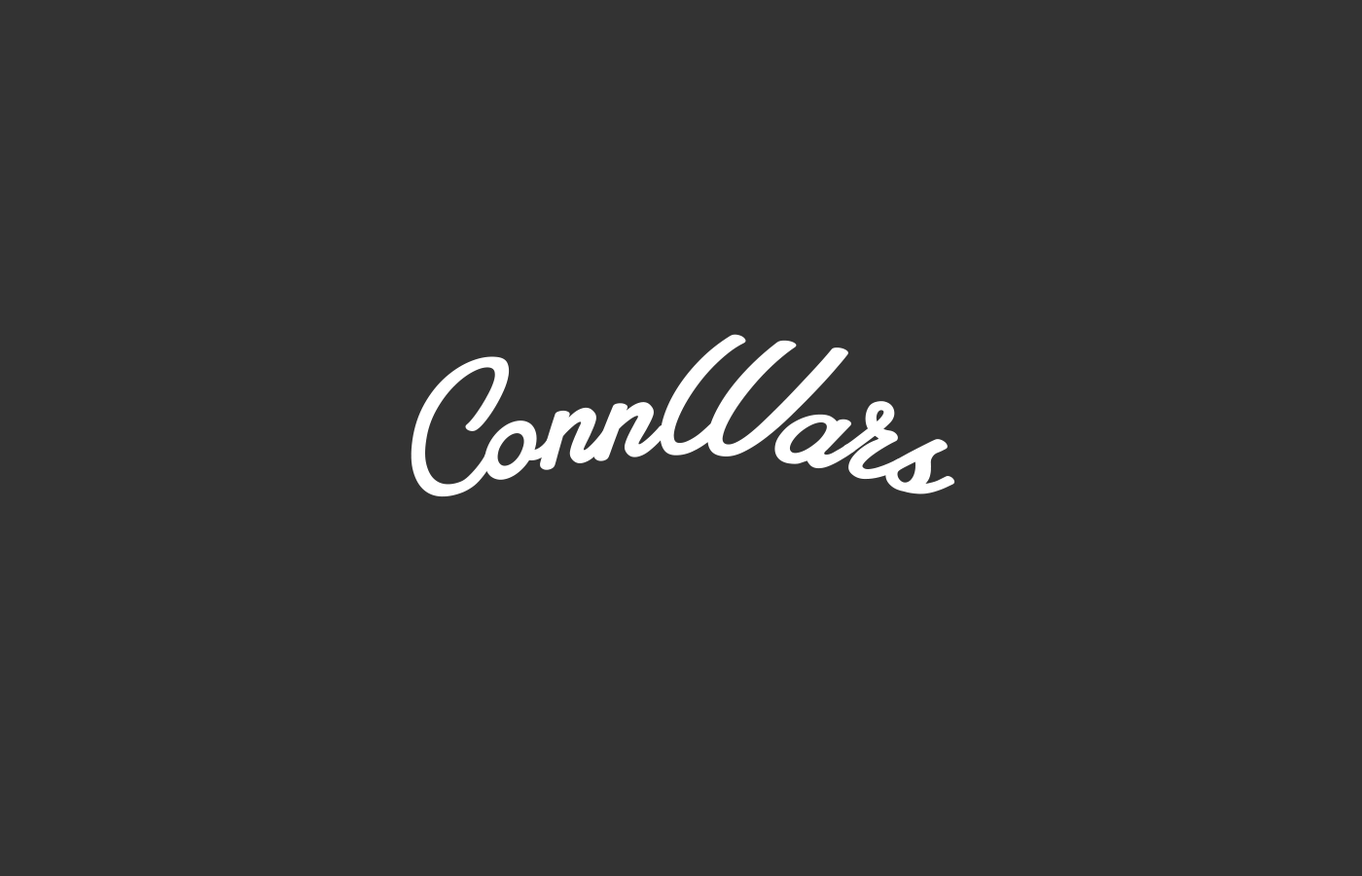
<style>
.page{position:relative;width:1362px;height:876px;background:#333333}
.page>*{position:absolute;margin:0}
.t1{font:178.3px "AmplifyPersonalUseOnly";color:#ffffff}
.t2{font:178.3px "AmplifyPersonalUseOnly";letter-spacing:-0.05em;color:#ffffff}
</style>
<div class="page">
<p class="t1" style="left:411px;top:334px;width:544px;height:163px">Conn<span class="t2">W</span>ars</p>
</div>
